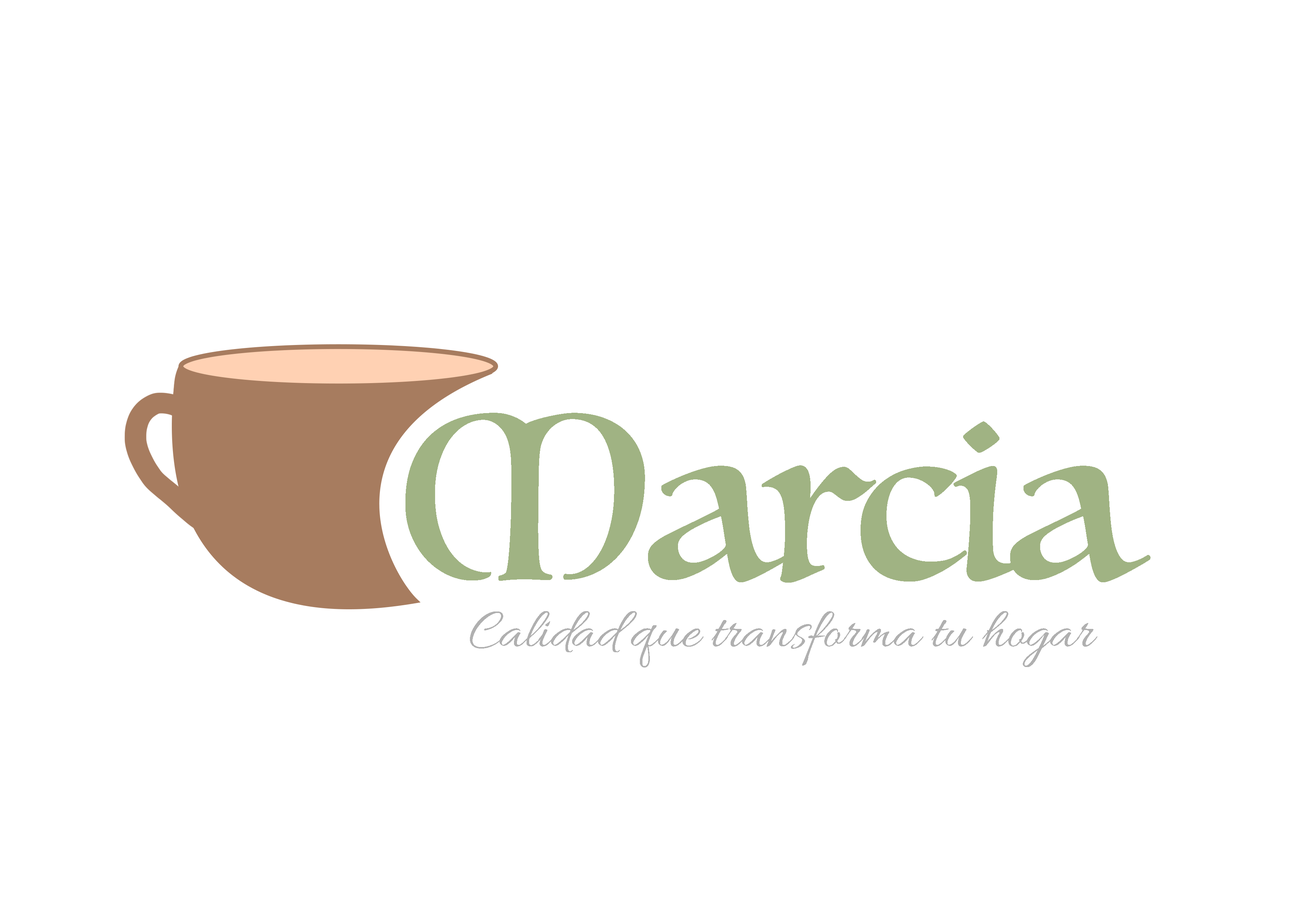
<style>
.page{position:relative;width:1299px;height:918px;background:#ffffff}
.page>*{position:absolute;margin:0}
.t1{font:227.4px "Luminari-Regular";letter-spacing:-0.025em;color:#a0b383}
.t2{font:57.7px "Allura-Regular";letter-spacing:-0.01em;color:#b0b0b0}
</style>
<div class="page">
<p class="t1" style="left:405px;top:413px;width:745px;height:170px">Marcia</p>
<p class="t2" style="left:470px;top:611px;width:627px;height:57px">Calidad que transforma tu hogar</p>
</div>
